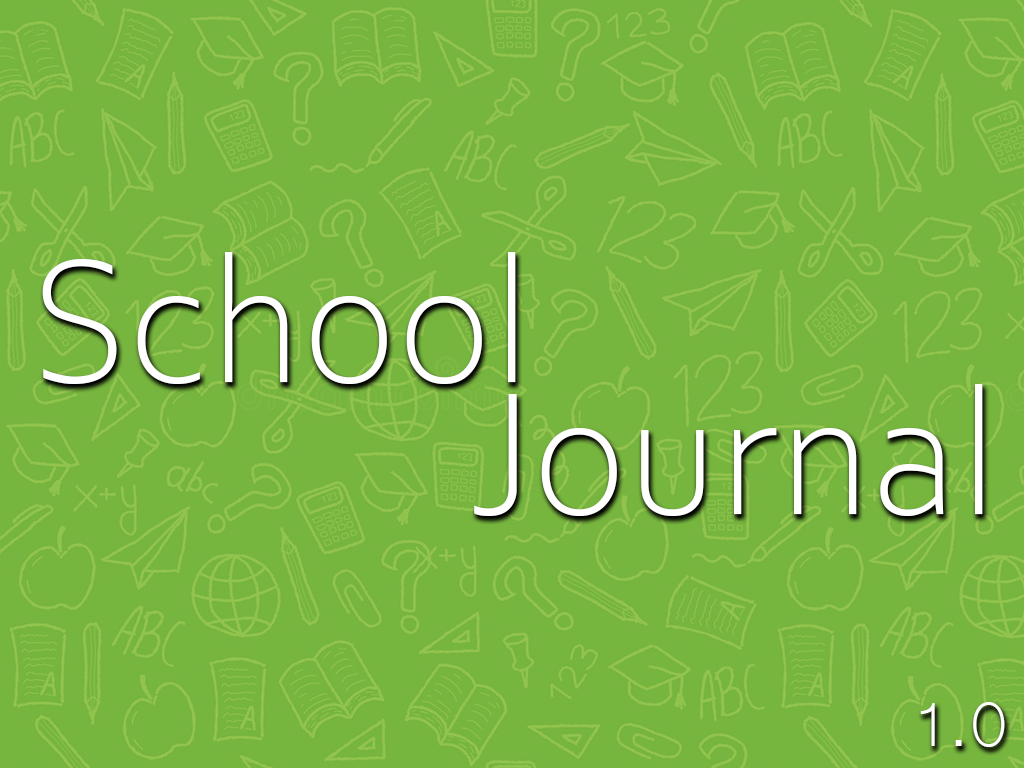
<style>
.page{position:relative;width:1024px;height:768px;background:#76b53e}
.page>*{position:absolute;margin:0}
.t1{font:184.2px "CorbelLight";color:#ffffff}
.t2{font:81px "Microsoft-Yi-Baiti";color:#ffffff}
</style>
<div class="page">
<p class="t1" style="left:42px;top:252px;width:474px;height:132px">School</p>
<p class="t1" style="left:474px;top:384px;width:509px;height:132px">Journal</p>
<p class="t2" style="left:920px;top:702px;width:85px;height:45px">1.0</p>
</div>
